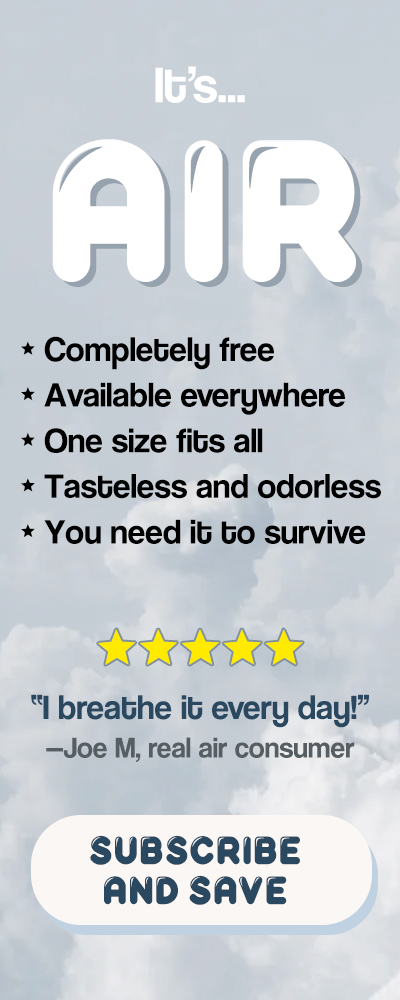
<style>
.page{position:relative;width:400px;height:1000px}
.page>*{position:absolute;margin:0}
.t1{font:56px "Coolvetica-Regular";color:#ffffff}
.t2{font:256px "Reglisse-Fill";color:#ffffff}
.t3{font:38px "Coolvetica-Regular";color:#000000}
.t4{font:102px "Coolvetica-Regular";color:#ffea00}
.t5{font:38px "Coolvetica-Regular";color:#2a4860}
.t6{font:32px "Coolvetica-Regular";color:#565d63}
.t7{font:50px/40px "Reglisse-Fill";color:#2a4860}
</style>
<div class="page">
<p class="t1" style="left:155px;top:66px;width:90px;height:37px">It’s...</p>
<p class="t2" style="left:52px;top:139px;width:304px;height:143px">AIR</p>
<p class="t3" style="left:21px;top:336px;width:360px;height:208px">• Completely free<br>• Available everywhere<br>• One size fits all<br>• Tasteless and odorless<br>• You need it to survive</p>
<p class="t4" style="left:98px;top:629px;width:205px;height:36px">•••••</p>
<p class="t5" style="left:31px;top:694px;width:338px;height:68px;text-align:center">“I breathe it every day!”<br><span class="t6">—Joe M, real air consumer</span></p>
<p class="t7" style="left:90px;top:835px;width:210px;height:70px;text-align:center">SUBSCRIBE<br>AND SAVE</p>
</div>
